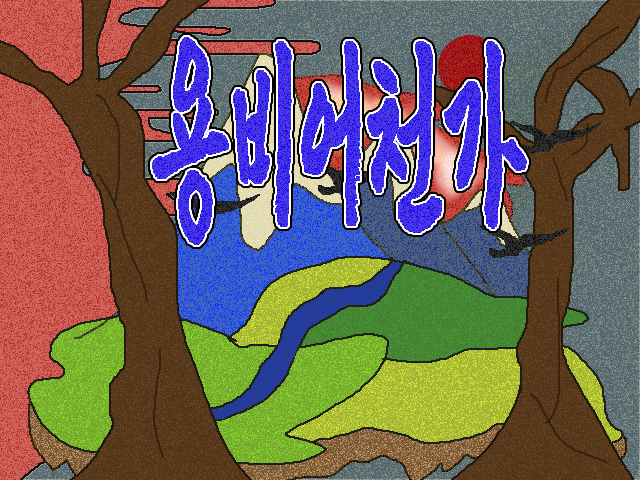
<style>
.page{position:relative;width:640px;height:480px}
.page>*{position:absolute;margin:0}
.t1{font:216.7px "Shilla_CultureM-Medium";font-weight:bold;scale:0.41 1}
</style>
<div class="page">
<p class="t1" style="left:152px;top:37px;width:375px;height:208px">용비어천가</p>
</div>
